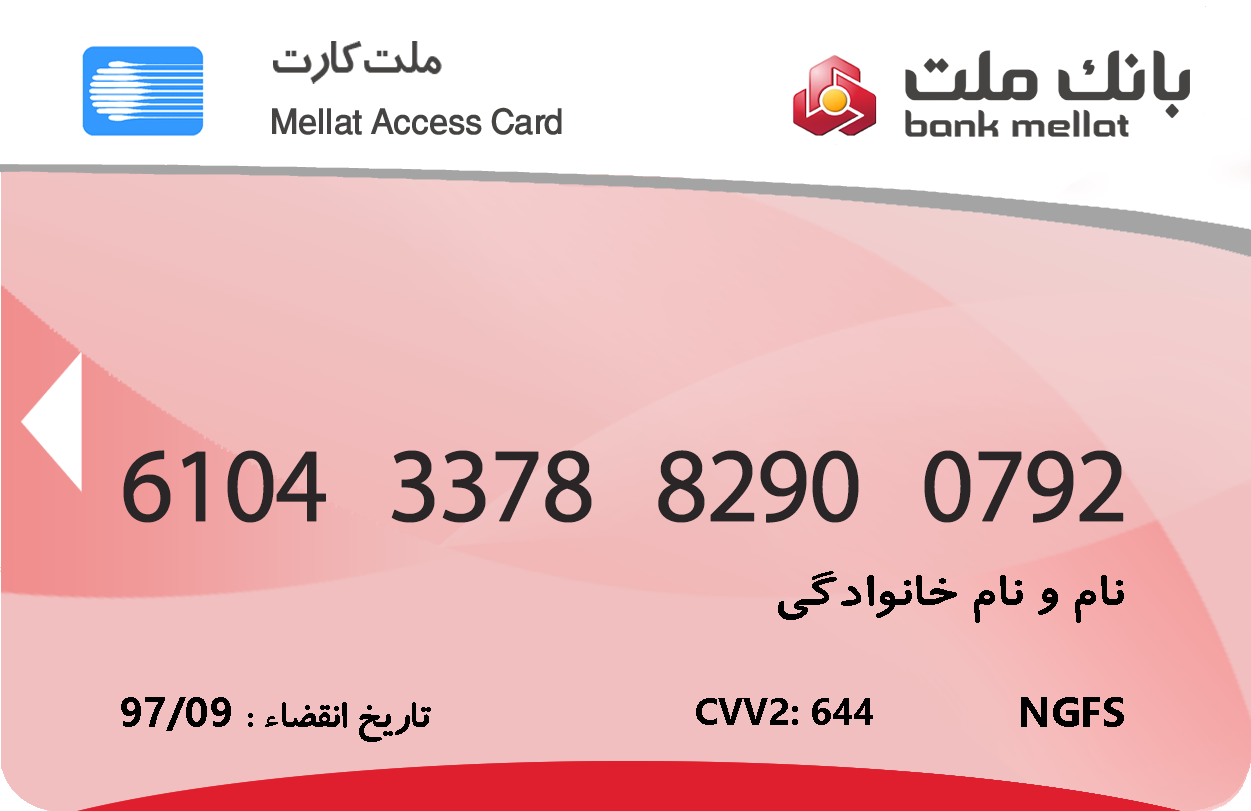
<style>
.page{position:relative;width:1251px;height:811px}
.page>*{position:absolute;margin:0}
.t1{font:51.3px "BTrafficBold";letter-spacing:-0.04em;color:#464443;scale:0.83 1}
.t2{font:50px "AGA-Arabesque";letter-spacing:-0.04em;color:#464443}
.t3{font:199.3px "ArialMT";color:#ffffff;scale:0.43 1}
.t4{font:106.3px "MyriadPro-Regular";letter-spacing:-0.04em;color:#2a2526;font-weight:bold;scale:0.97 1}
.t5{font:50px "BKoodakBold";color:#000000;scale:1.18 1}
.t6{font:41.7px "BKoodakBold";color:#000000}
.t7{font:41.7px "Gadugi-Bold";color:#000000}
.t8{font:37.5px "Gadugi-Bold";color:#000000}
</style>
<div class="page">
<p class="t1" style="left:273px;top:41px;width:169px;height:43px">ملت کارت</p>
<p class="t2" style="left:272px;top:107px;width:290px;height:28px">Mellat Access Card</p>
<p class="t3" style="left:20px;top:351px;width:62px;height:142px">◄</p>
<p class="t4" style="left:123px;top:450px;width:1001px;height:73px">6104   3378   8290   0792</p>
<p class="t5" style="left:778px;top:571px;width:346px;height:52px">نام و نام خانوادگی</p>
<p class="t6" style="left:121px;top:697px;width:310px;height:45px">تاریخ انقضاء :<span class="t7"> 97/09</span></p>
<p class="t8" style="left:696px;top:698px;width:177px;height:27px">CVV2: 644</p>
<p class="t7" style="left:1021px;top:697px;width:103px;height:30px">NGFS</p>
</div>
